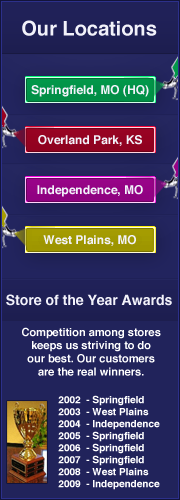
<style>
.page{position:relative;width:180px;height:500px;background:#21235b}
.page>*{position:absolute;margin:0}
.t1{font:20px "Helvetica-Bold";color:#f2f2fa}
.t2{font:12px "Helvetica-Bold";color:#f2f2fa}
.t3{font:14px "Helvetica-Bold";color:#f2f2fa}
.t4{font:11px "Helvetica-Bold";color:#ffffff}
.t5{font:10px "Helvetica-Bold";color:#ffffff}
</style>
<div class="page">
<p class="t1" style="left:22px;top:20px;width:135px;height:16px">Our Locations</p>
<p class="t2" style="left:31px;top:85px;width:118px;height:12px">Springfield, MO (HQ)</p>
<p class="t2" style="left:38px;top:135px;width:104px;height:11px">Overland Park, KS</p>
<p class="t2" style="left:37px;top:185px;width:106px;height:12px">Independence, MO</p>
<p class="t2" style="left:43px;top:235px;width:93px;height:11px">West Plains, MO</p>
<p class="t3" style="left:6px;top:294px;width:166px;height:12px">Store of the Year Awards</p>
<p class="t4" style="left:22px;top:327px;width:139px;height:49px;text-align:center">Competition among stores keeps us striving to do our best. Our customers are the real winners.</p>
<p class="t5" style="left:58px;top:395px;width:102px;height:95px">2002  - Springfield<br>2003  - West Plains<br>2004  - Independence<br>2005  - Springfield<br>2006  - Springfield<br>2007  - Springfield<br>2008  - West Plains<br>2009  - Independence</p>
</div>
